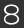
<style>
.page{position:relative;width:24px;height:28px;background:#333333}
.page>*{position:absolute;margin:0}
.t1{font:27.3px "NexaLight";color:#ffffff;scale:0.97 1}
</style>
<div class="page">
<p class="t1" style="left:4px;top:4px;width:15px;height:21px">8</p>
</div>
